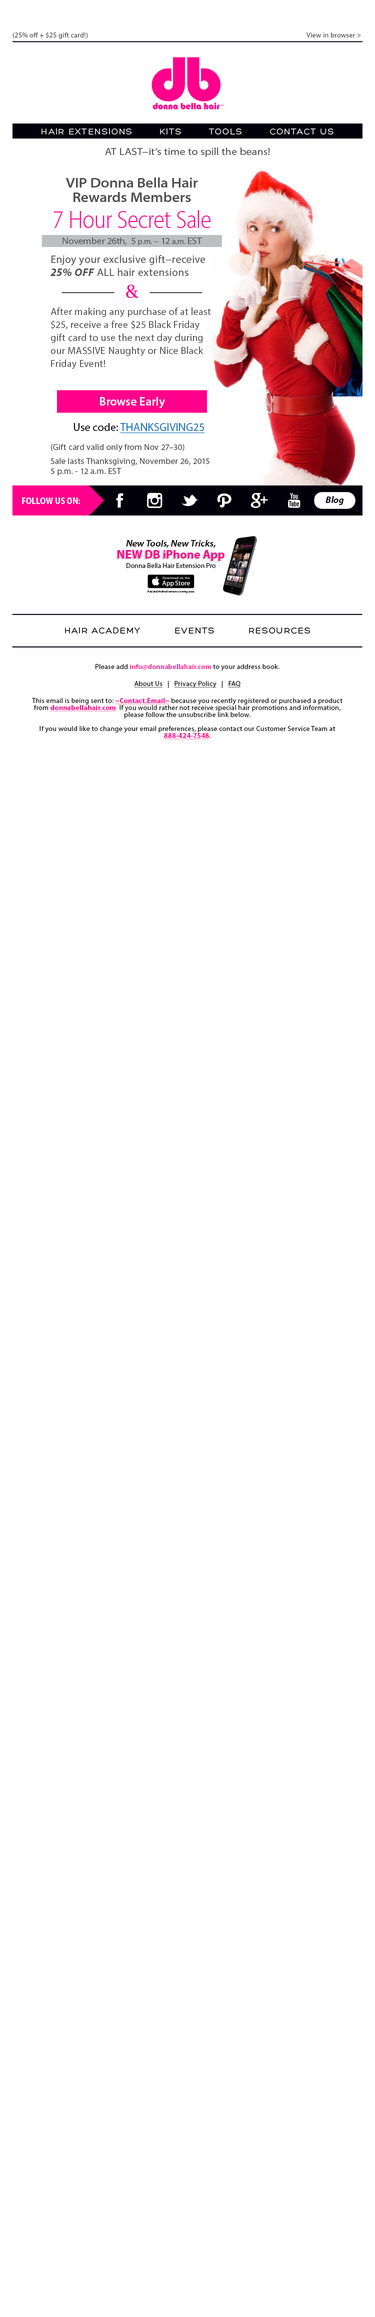
<style>
.page{position:relative;width:375px;height:2317px;background:#ffffff}
.page>*{position:absolute;margin:0}
.t1{font:7px "MyriadPro-Regular";letter-spacing:0.025em;color:#4d4d4f}
.t2{font:9px "Hero";letter-spacing:0.1em;color:#ffffff}
.t3{font:10px "MyriadPro-SemiExt";letter-spacing:0.025em;color:#4d4d4f}
.t4{font:14px/14.8px "MyriadPro-SemiboldSemiExt";color:#4d4d4f}
.t5{font:25px "MyriadPro-LightSemiCn";color:#ff008c}
.t6{font:9px "MyriadPro-SemiExt";color:#58595b}
.t7{font:7.5px "MyriadPro-SemiExt";color:#58595b}
.t8{font:10px/13px "MyriadPro-Regular";letter-spacing:0.025em;color:#4d4d4f}
.t9{font:11px/13px "MyriadPro-Regular";letter-spacing:0.025em;color:#4d4d4f}
.t10{font:11px/13px "MyriadPro-BoldIt";letter-spacing:0.025em;color:#4d4d4f}
.t11{font:12px "MyriadPro-Semibold";color:#ffffff}
.t12{font:11.3px "MyriadPro-Regular";color:#1c75bc;text-decoration:underline}
.t13{font:11.3px "MyriadPro-Regular";color:#000000}
.t14{font:8.5px/14.2px "MyriadPro-Regular";letter-spacing:0.025em;color:#4d4d4f}
.t15{font:8.5px "MyriadPro-Regular";letter-spacing:0.025em;color:#4d4d4f}
.t16{font:9px "MyriadPro-BoldSemiCn";color:#ffffff}
.t17{font:9.3px "MyriadPro-BoldIt";color:#01000b}
.t18{font:9px "MyriadPro-SemiboldSemiExtIt";color:#000000}
.t19{font:12px "MyriadPro-Bold";color:#ff008c}
.t20{font:7px "MyriadPro-Regular";color:#000000}
.t21{font:3px "MyriadPro-It";color:#000000}
.t22{font:9px "Hero";letter-spacing:0.1em;color:#01000b}
.t23{font:7px/7px "MyriadPro-Regular";letter-spacing:0.025em;color:#000000}
.t24{font:7px "MyriadPro-Regular";letter-spacing:0.025em;color:#000000}
.t25{font:7px "MyriadPro-Semibold";letter-spacing:0.025em;color:#ff008c}
.t26{font:7px "MyriadPro-Regular";letter-spacing:0.025em;color:#000000;text-decoration:underline}
.t27{font:7px "MyriadPro-Bold";letter-spacing:0.025em;color:#ff008c;text-decoration:underline}
.t28{font:7px/7px "MyriadPro-Bold";letter-spacing:0.025em;color:#ff008c;text-decoration:underline}
</style>
<div class="page">
<p class="t1" style="left:12px;top:32px;width:349px;height:7px">(25% off + $25 gift card!)                         View in browser &gt;</p>
<p class="t2" style="left:42px;top:128px;width:292px;height:7px">HAIR EXTENSIONS        KITS        TOOLS        CONTACT US</p>
<p class="t3" style="left:105px;top:148px;width:165px;height:9px">AT LAST­­−it’s time to spill the beans!</p>
<p class="t4" style="left:66px;top:178px;width:132px;height:24px;text-align:center">VIP Donna Bella Hair Rewards Members</p>
<p class="t5" style="left:54px;top:210px;width:156px;height:18px">7 Hour Secret Sale</p>
<p class="t6" style="left:62px;top:238px;width:140px;height:8px">November 26th,  5<span class="t7"> p.m.</span> – 12<span class="t7"> a.m. </span>EST</p>
<p class="t8" style="left:50px;top:255px;width:161px;height:114px"><span class="t9">Enjoy your exclusive gift­­−receive </span><span class="t10">25% OFF</span><span class="t9"> ALL hair extensions</span> <br> <br><br>After making any purchase of at least $25, receive a free $25 Black Friday gift card to use the next day during our MASSIVE Naughty or Nice Black Friday Event!</p>
<p class="t11" style="left:100px;top:397px;width:65px;height:11px">Browse Early</p>
<p class="t12" style="left:74px;top:423px;width:131px;height:11px"><span class="t13">Use code: </span>THANKSGIVING25</p>
<p class="t14" style="left:50px;top:444px;width:160px;height:32px"><span class="t15">(Gift card valid only from Nov 27–30)<br></span>Sale lasts Thanksgiving, November 26, 2015<br><span class="t15">5 p.m. ­- 12 a.m. EST</span></p>
<p class="t16" style="left:22px;top:498px;width:58px;height:6px">FOLLOW US ON:</p>
<p class="t17" style="left:326px;top:496px;width:18px;height:9px">Blog</p>
<p class="t18" style="left:126px;top:540px;width:90px;height:8px">New Tools, New Tricks,</p>
<p class="t19" style="left:118px;top:550px;width:106px;height:11px">NEW DB iPhone App</p>
<p class="t20" style="left:126px;top:563px;width:90px;height:5px">Donna Bella Hair Extension Pro</p>
<p class="t21" style="left:147px;top:590px;width:47px;height:4px">iPad and Android versions coming soon.</p>
<p class="t22" style="left:65px;top:627px;width:245px;height:7px">HAIR ACADEMY          EVENTS          RESOURCES</p>
<p class="t23" style="left:32px;top:664px;width:310px;height:76px;text-align:center"><span class="t24">Please add </span><span class="t25">info@donnabellahair.com</span><span class="t24"> to your address book.<br><br></span><span class="t26">About Us</span><span class="t24">   |   </span><span class="t26">Privacy Policy</span><span class="t24">   |   </span><span class="t26">FAQ<br></span><span class="t24"><br>This email is being sent to: </span><span class="t27">~Contact.Email~</span><span class="t24"> because you recently registered </span>or purchased a product from <span class="t28">donnabellahair.com</span>  If you would rather not receive special hair promotions and information, please follow the unsubscribe link below.<br><br>If you would like to change your email preferences, please contact our Customer Service Team at <span class="t28">888-424-7548</span>.</p>
</div>
